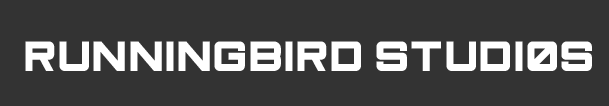
<style>
.page{position:relative;width:609px;height:106px;background:#333333}
.page>*{position:absolute;margin:0}
.t1{font:42.6px "Primal";color:#ffffff}
</style>
<div class="page">
<p class="t1" style="left:25px;top:41px;width:567px;height:30px">Runningbird Studios</p>
</div>
